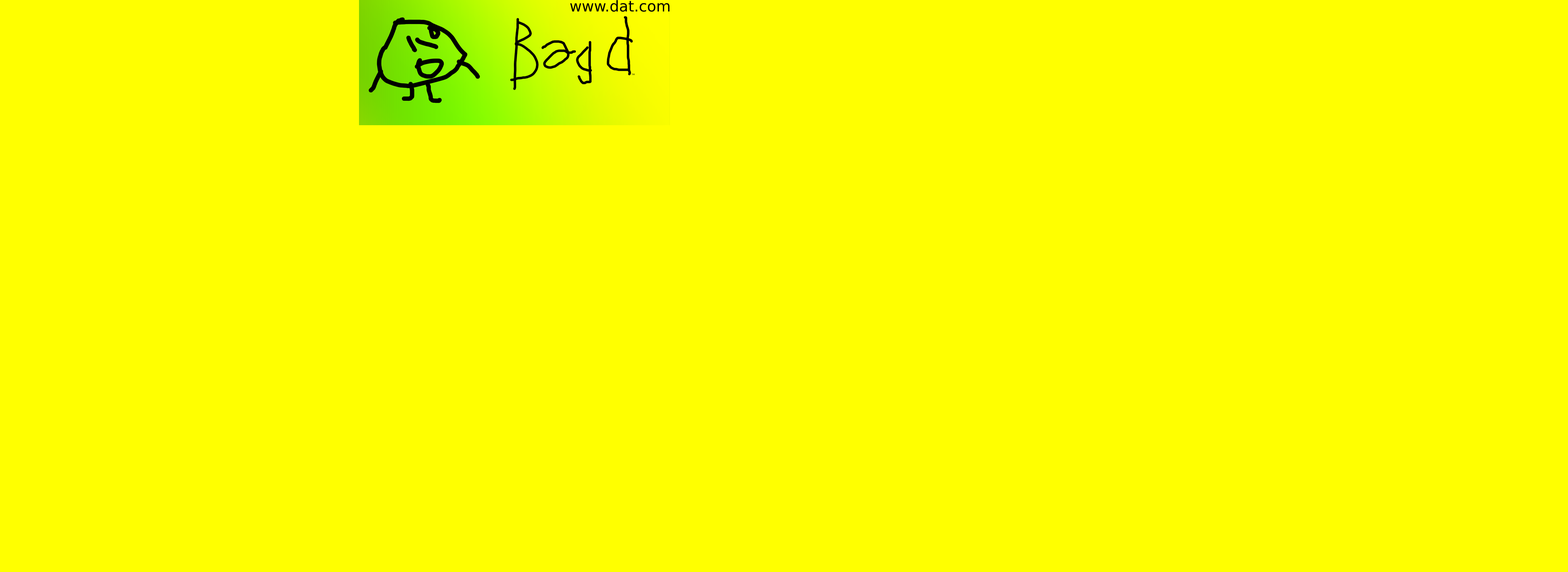
<style>
.page{position:relative;width:1568px;height:572px;background:#ffff00}
.page>*{position:absolute;margin:0}
.t1{font:14.9px "DejaVuSans";color:#000000}
</style>
<div class="page">
<p class="t1" style="left:570px;top:0px;width:100px;height:12px">www.dat.com</p>
</div>
